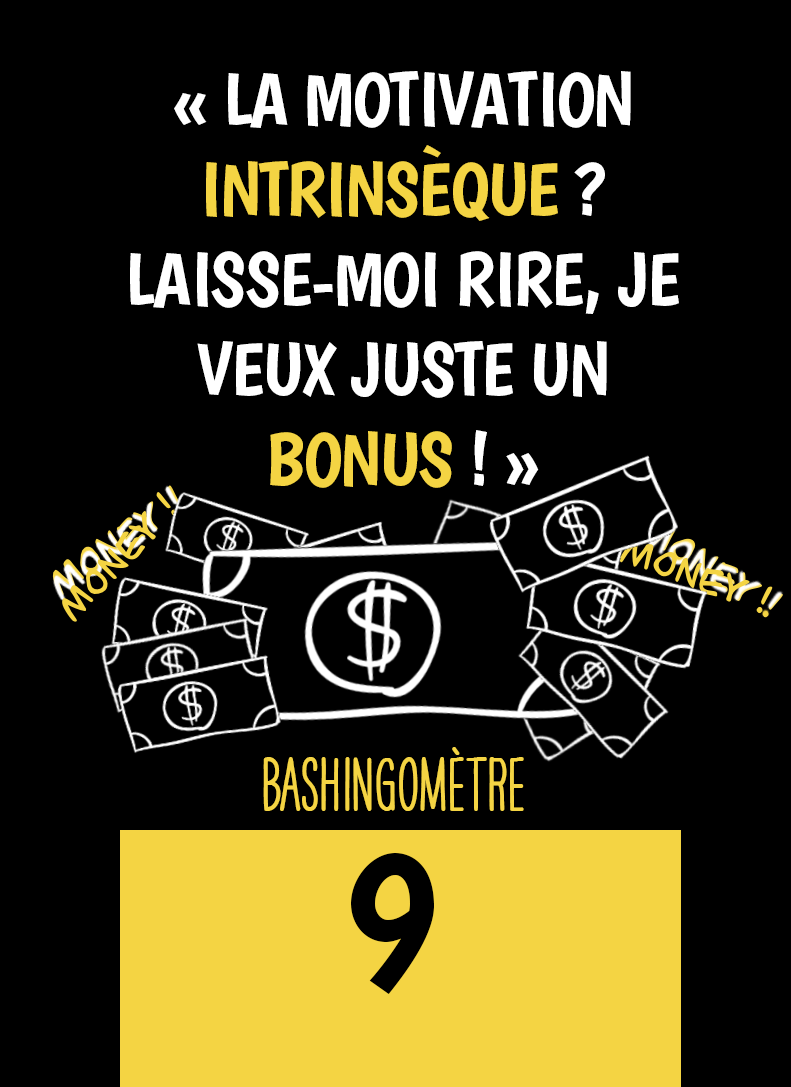
<style>
.page{position:relative;width:791px;height:1087px;background:#000000}
.page>*{position:absolute;margin:0}
.t1{font:75px "Boogaloo-Regular";letter-spacing:-0.02em;color:#ffffff}
.t2{font:75px "Boogaloo-Regular";letter-spacing:-0.02em;color:#f4d443}
.t3{font:66.7px "HAVEANICEDAYTallW04-Bold";color:#f4d443}
.t4{font:200px "Boogaloo-Regular";color:#000000}
</style>
<div class="page">
<p class="t1" style="left:130px;top:71px;width:549px;height:417px;text-align:center">« LA MOTIVATION  <span class="t2">INTRINSÈQUE </span>? LAISSE-MOI RIRE, JE VEUX JUSTE UN <span class="t2">BONUS</span> ! »</p>
<p class="t3" style="left:263px;top:747px;width:261px;height:64px">BASHINgomètre</p>
<p class="t4" style="left:351px;top:853px;width:83px;height:141px">9</p>
</div>
